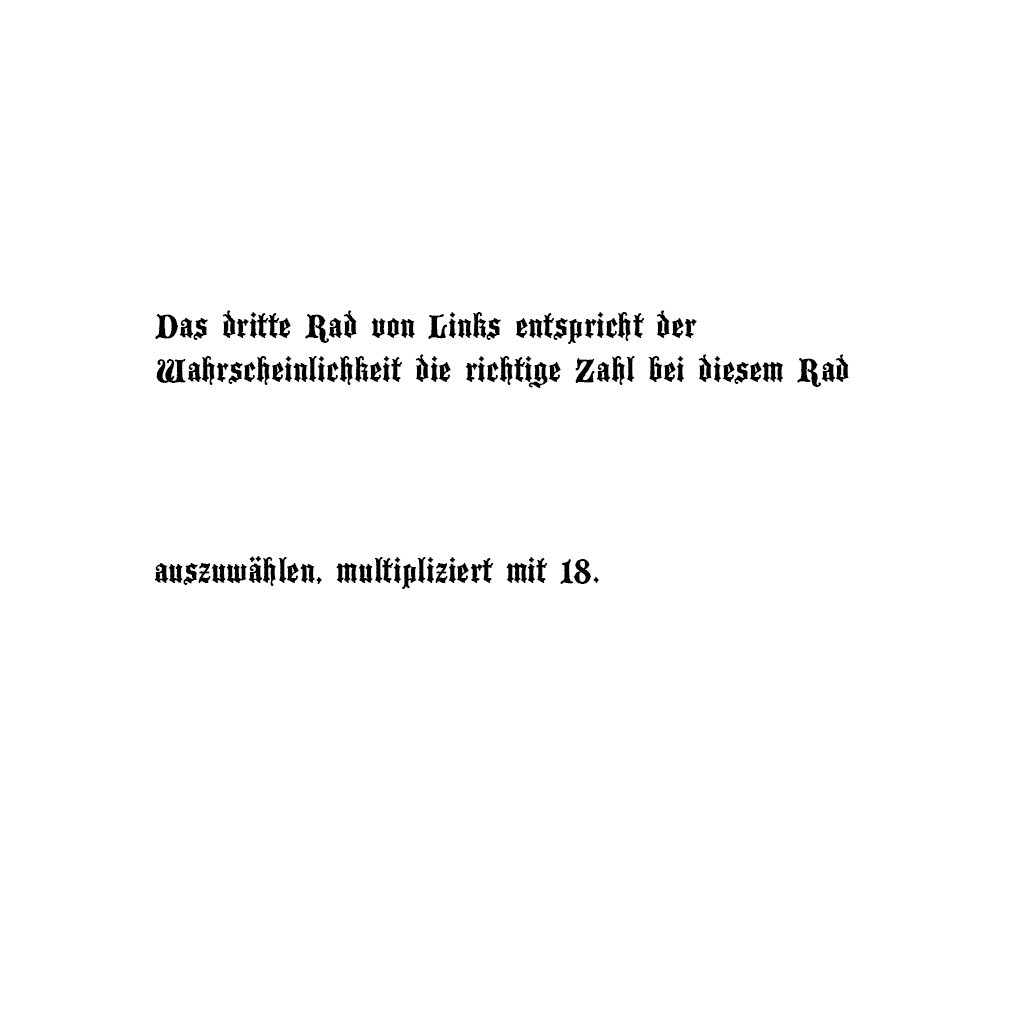
<style>
.page{position:relative;width:1024px;height:1024px;background:#ffffff}
.page>*{position:absolute;margin:0}
.t1{font:36px "BlackwoodCastle";color:#000000}
</style>
<div class="page">
<p class="t1" style="left:155px;top:310px;width:694px;height:78px">Das dritte Rad von Links entspricht der <br>Wahrscheinlichkeit die richtige Zahl bei diesem Rad</p>
<p class="t1" style="left:154px;top:556px;width:445px;height:33px">auszuwählen, multipliziert mit 18.</p>
</div>
